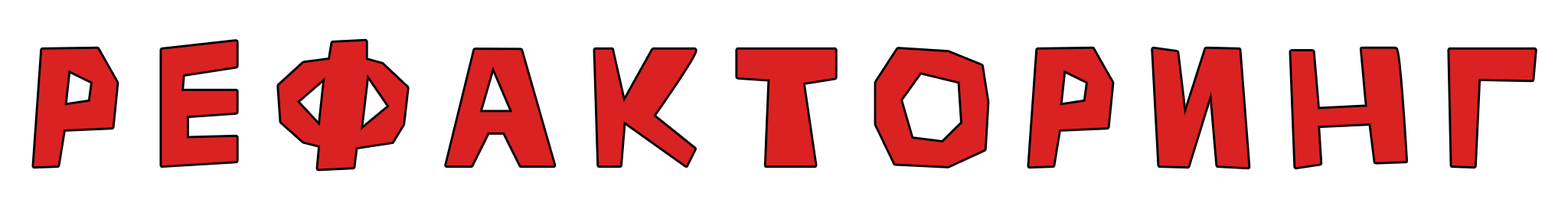
<style>
.page{position:relative;width:1568px;height:216px;background:#ffffff}
.page>*{position:absolute;margin:0}
.t1{font:169.5px "ZeroCool";letter-spacing:0.2em;color:#da2222}
</style>
<div class="page">
<p class="t1" style="left:34px;top:41px;width:1501px;height:128px">Рефакторинг</p>
</div>
